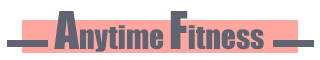
<style>
.page{position:relative;width:320px;height:60px;background:#ffffff}
.page>*{position:absolute;margin:0}
.t1{font:30px "Impact";color:#5e6472}
.t2{font:48px "Impact";color:#5e6472}
</style>
<div class="page">
<p class="t1" style="left:54px;top:11px;width:210px;height:41px"><span class="t2">A</span>nytime <span class="t2">F</span>itness</p>
</div>
